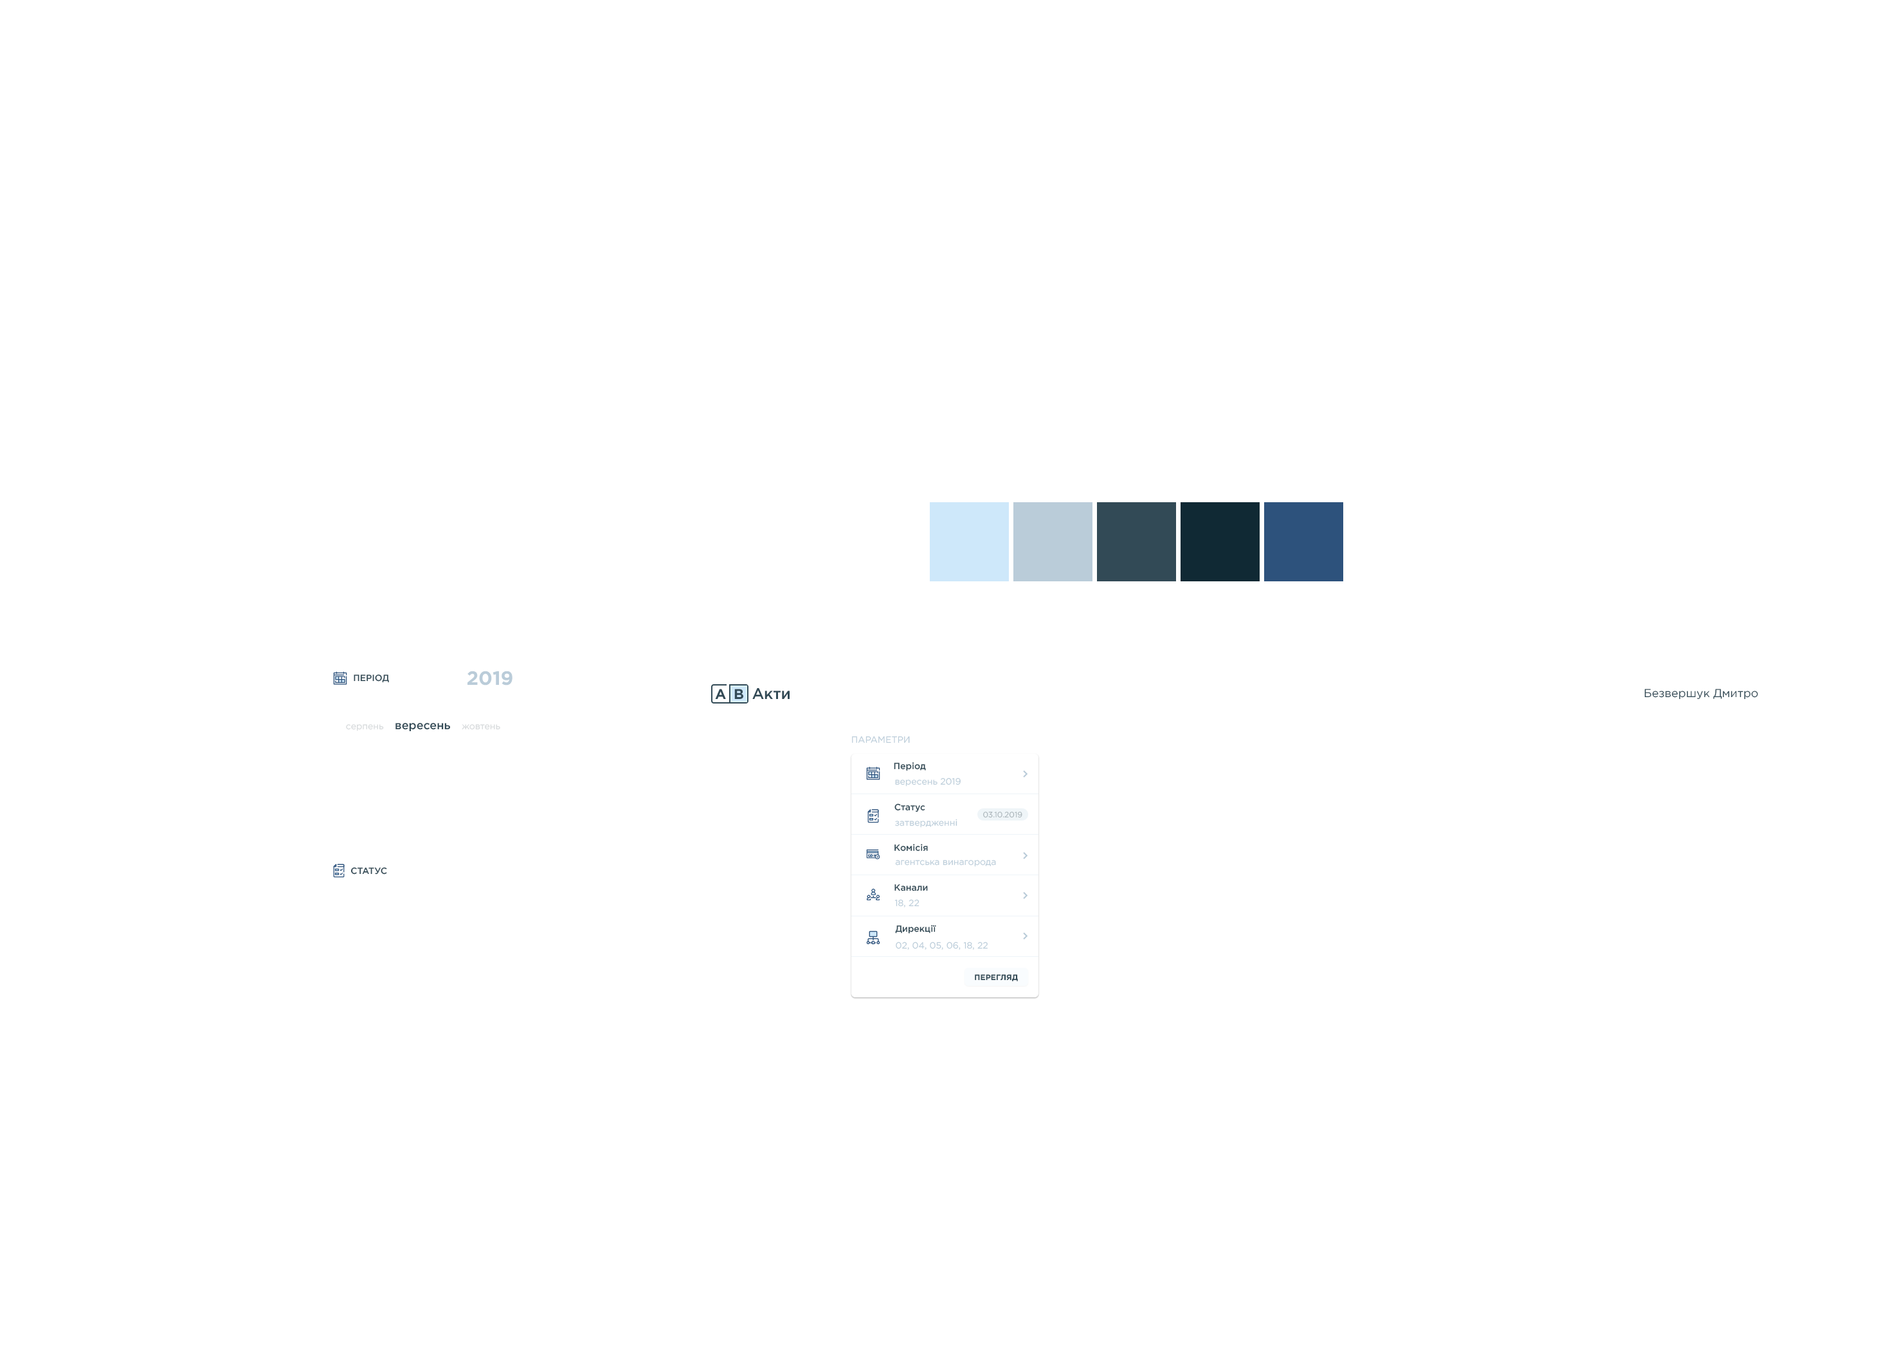
<style>
.page{position:relative;width:1893px;height:1353px;background:#ffffff}
.page>*{position:absolute;margin:0}
.t1{font:9px "GothamPro-Medium";color:#324a56;text-transform:uppercase}
.t2{font:19.3px "GothamPro-Bold";color:#baccd9}
.t3{font:14.1px "GothamPro-Bold";color:#324a56}
.t4{font:15.4px "GothamPro-Medium";color:#324a56}
.t5{font:11.6px "GothamPro";color:#324a56}
.t6{font:9px "GothamPro";color:#d4d7d9}
.t7{font:11.6px "GothamPro-Medium";color:#324a56}
.t8{font:9px "GothamPro";color:#baccd9}
.t9{font:9px "GothamPro-Medium";color:#324a56}
.t10{font:7.7px "GothamPro";color:#a8b2b7}
.t11{font:7.7px "GothamPro-Bold";letter-spacing:0.01em;color:#324a56;text-transform:uppercase}
</style>
<div class="page">
<p class="t1" style="left:354px;top:674px;width:35px;height:9px">Період</p>
<p class="t2" style="left:467px;top:670px;width:45px;height:15px">2019</p>
<p class="t3" style="left:715px;top:688px;width:11px;height:11px">A</p>
<p class="t3" style="left:734px;top:688px;width:9px;height:11px">В</p>
<p class="t4" style="left:752px;top:688px;width:37px;height:11px">Акти</p>
<p class="t5" style="left:1644px;top:688px;width:114px;height:11px">Безвершук Дмитро</p>
<p class="t6" style="left:346px;top:724px;width:38px;height:7px">серпень</p>
<p class="t7" style="left:395px;top:723px;width:55px;height:8px">вересень</p>
<p class="t6" style="left:462px;top:724px;width:38px;height:6px">жовтень</p>
<p class="t8" style="left:852px;top:736px;width:58px;height:7px">ПАРАМЕТРИ</p>
<p class="t9" style="left:894px;top:762px;width:32px;height:9px">Період</p>
<p class="t8" style="left:895px;top:777px;width:65px;height:9px">вересень 2019</p>
<p class="t9" style="left:894px;top:803px;width:31px;height:9px">Статус</p>
<p class="t8" style="left:895px;top:818px;width:62px;height:9px">затвердженні</p>
<p class="t10" style="left:983px;top:811px;width:39px;height:7px">03.10.2019</p>
<p class="t9" style="left:894px;top:843px;width:34px;height:8px">Комісія</p>
<p class="t1" style="left:350px;top:867px;width:37px;height:7px">СТАТУС</p>
<p class="t8" style="left:895px;top:860px;width:101px;height:7px">агентська винагорода</p>
<p class="t9" style="left:894px;top:884px;width:34px;height:7px">Канали</p>
<p class="t8" style="left:894px;top:899px;width:25px;height:8px">18, 22</p>
<p class="t9" style="left:895px;top:924px;width:41px;height:9px">Дирекції</p>
<p class="t8" style="left:896px;top:941px;width:91px;height:9px">02, 04, 05, 06, 18, 22</p>
<p class="t11" style="left:975px;top:974px;width:43px;height:7px">Перегляд</p>
</div>
